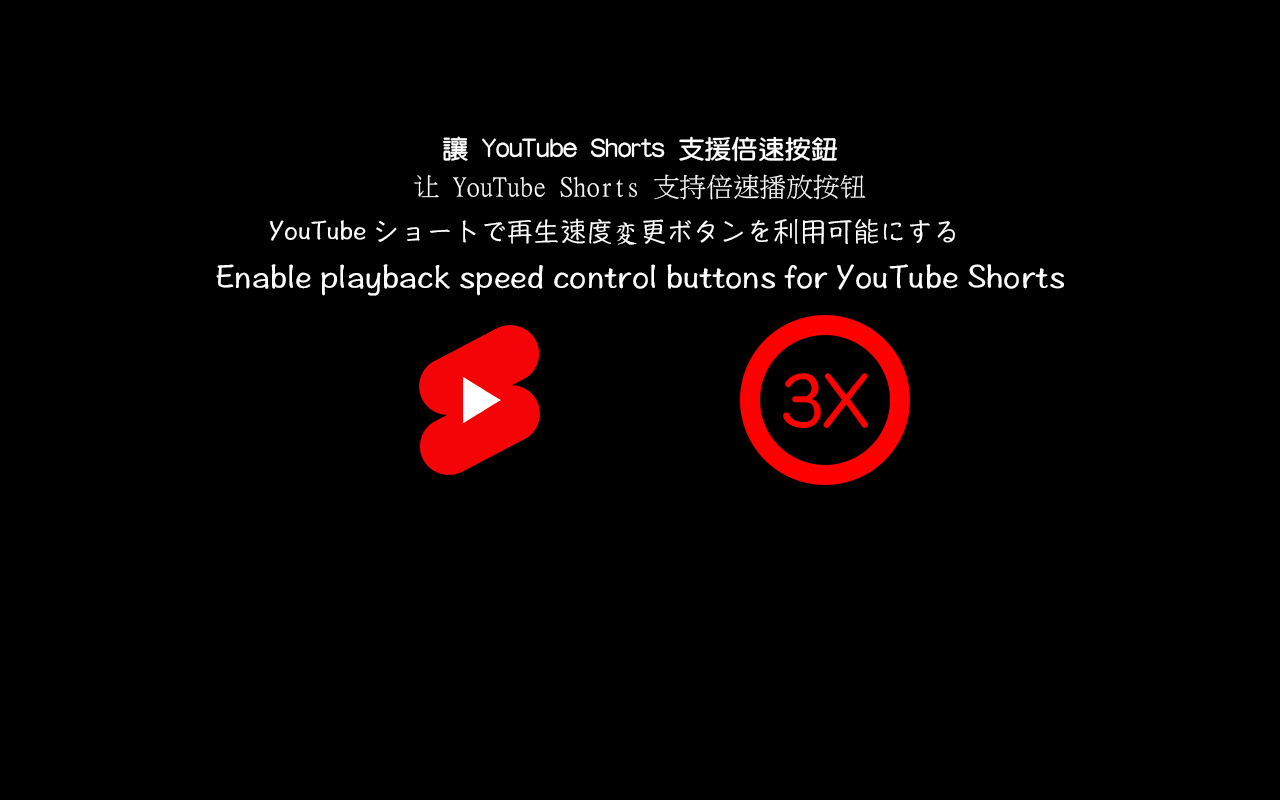
<style>
.page{position:relative;width:1280px;height:800px;background:#000000}
.page>*{position:absolute;margin:0}
.t1{font:26.7px "©M¥­²Ê¶ê";color:#ffffff}
.t2{font:26.7px "MingLiU";color:#ffffff}
.t3{font:26.7px "DFPHannotateW5-B5-TW";color:#ffffff}
.t4{font:26.7px "DFKaiShu-SB-Estd-BF";color:#ffffff}
.t5{font:33.3px "DFPHannotateW5-B5-TW";color:#ffffff}
</style>
<div class="page">
<p class="t1" style="left:443px;top:136px;width:395px;height:26px">讓 YouTube Shorts 支援倍速按鈕</p>
<p class="t2" style="left:414px;top:174px;width:452px;height:26px">让 YouTube Shorts 支持倍速播放按钮</p>
<p class="t3" style="left:269px;top:218px;width:686px;height:27px">YouTube ショートで再生速度<span class="t4">変</span>更ボタンを利用可能にする</p>
<p class="t5" style="left:216px;top:264px;width:848px;height:32px">Enable playback speed control buttons for YouTube Shorts</p>
</div>
